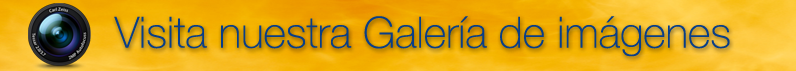
<style>
.page{position:relative;width:796px;height:71px}
.page>*{position:absolute;margin:0}
.t1{font:43.1px "HelveticaNeueCE-Thin";color:#083e88}
</style>
<div class="page">
<p class="t1" style="left:114px;top:16px;width:616px;height:41px">Visita nuestra Galería de imágenes</p>
</div>
